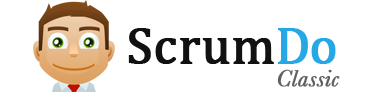
<style>
.page{position:relative;width:372px;height:102px;background:#ffffff}
.page>*{position:absolute;margin:0}
.t1{font:52px "Cambria";color:#111111;font-weight:bold}
.t2{font:52px "Cambria";color:#26a7e6;font-weight:bold}
.t3{font:24px "Baskerville-Italic";color:#606060;font-weight:bold}
</style>
<div class="page">
<p class="t1" style="left:128px;top:28px;width:208px;height:36px">Scrum<span class="t2">Do</span></p>
<p class="t3" style="left:277px;top:69px;width:63px;height:18px">Classic</p>
</div>
